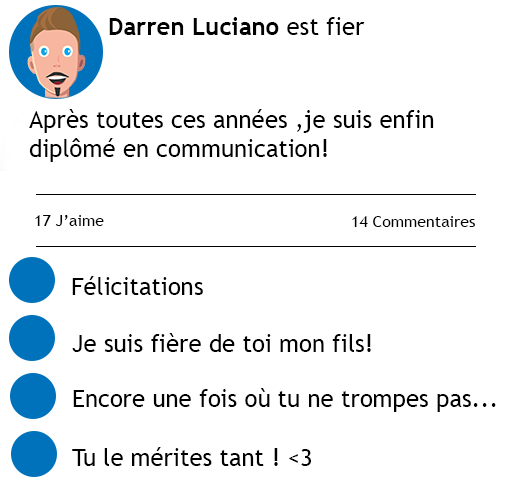
<style>
.page{position:relative;width:512px;height:494px;background:#ffffff}
.page>*{position:absolute;margin:0}
.t1{font:24px "TrebuchetMS-Bold";color:#000000}
.t2{font:24px "TrebuchetMS";color:#000000}
.t3{font:16px "TrebuchetMS";color:#000000}
</style>
<div class="page">
<p class="t1" style="left:109px;top:17px;width:256px;height:18px">Darren Luciano <span class="t2">est fier</span></p>
<p class="t2" style="left:29px;top:109px;width:405px;height:53px">Après toutes ces années ,je suis enfin <br>diplômé en communication!</p>
<p class="t3" style="left:35px;top:215px;width:69px;height:11px">17 J’aime</p>
<p class="t3" style="left:352px;top:216px;width:123px;height:11px">14 Commentaires</p>
<p class="t2" style="left:72px;top:276px;width:131px;height:19px">Félicitations</p>
<p class="t2" style="left:72px;top:333px;width:299px;height:19px">Je suis fière de toi mon fils!</p>
<p class="t2" style="left:73px;top:388px;width:423px;height:24px">Encore une fois où tu ne trompes pas...</p>
<p class="t2" style="left:72px;top:447px;width:239px;height:19px">Tu le mérites tant ! &lt;3</p>
</div>
